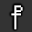
<style>
.page{position:relative;width:32px;height:32px;background:#333333}
.page>*{position:absolute;margin:0}
.t1{font:25px "UnifontMedium";color:#ffffff}
</style>
<div class="page">
<p class="t1" style="left:11px;top:5px;width:12px;height:25px">⳨</p>
</div>
